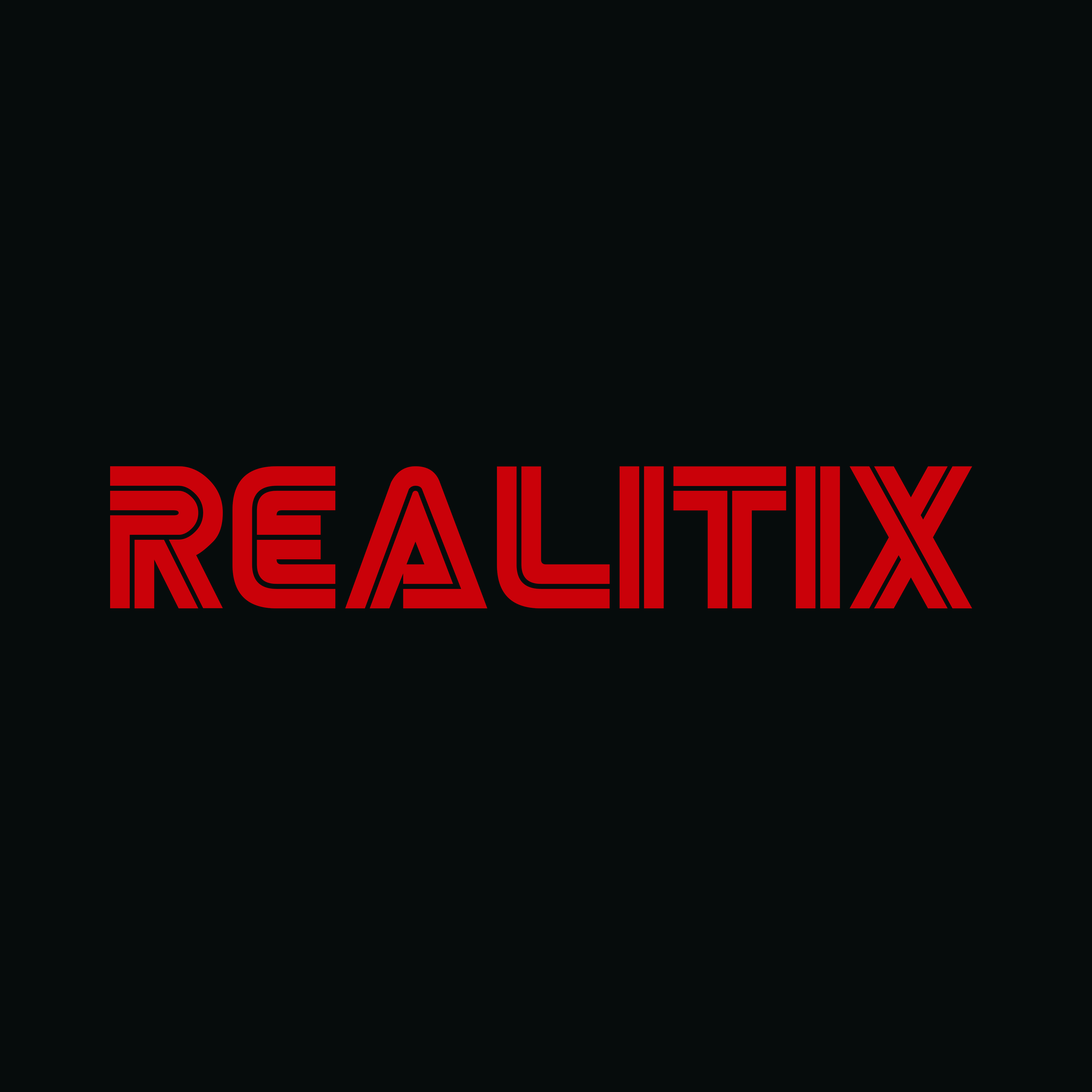
<style>
.page{position:relative;width:1092px;height:1092px;background:#060c0c}
.page>*{position:absolute;margin:0}
.t1{font:167.1px "MrRobot";color:#ca0109}
</style>
<div class="page">
<p class="t1" style="left:110px;top:466px;width:862px;height:142px">realitix</p>
</div>
